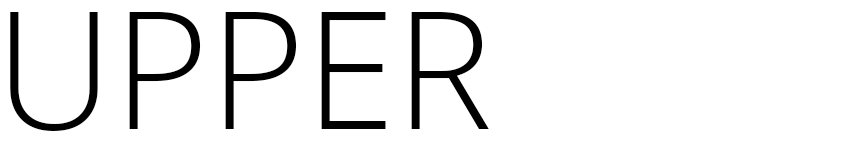
<style>
.page{position:relative;width:862px;height:143px;background:#ffffff}
.page>*{position:absolute;margin:0}
.t1{font:164px "OpenSans-Light";color:#000000}
.t2{font:164px "OpenSans-Light";color:#ffffff}
</style>
<div class="page">
<p class="t1" style="left:10px;top:10px;width:853px;height:121px">UPPER<span class="t2">CASE</span></p>
</div>
